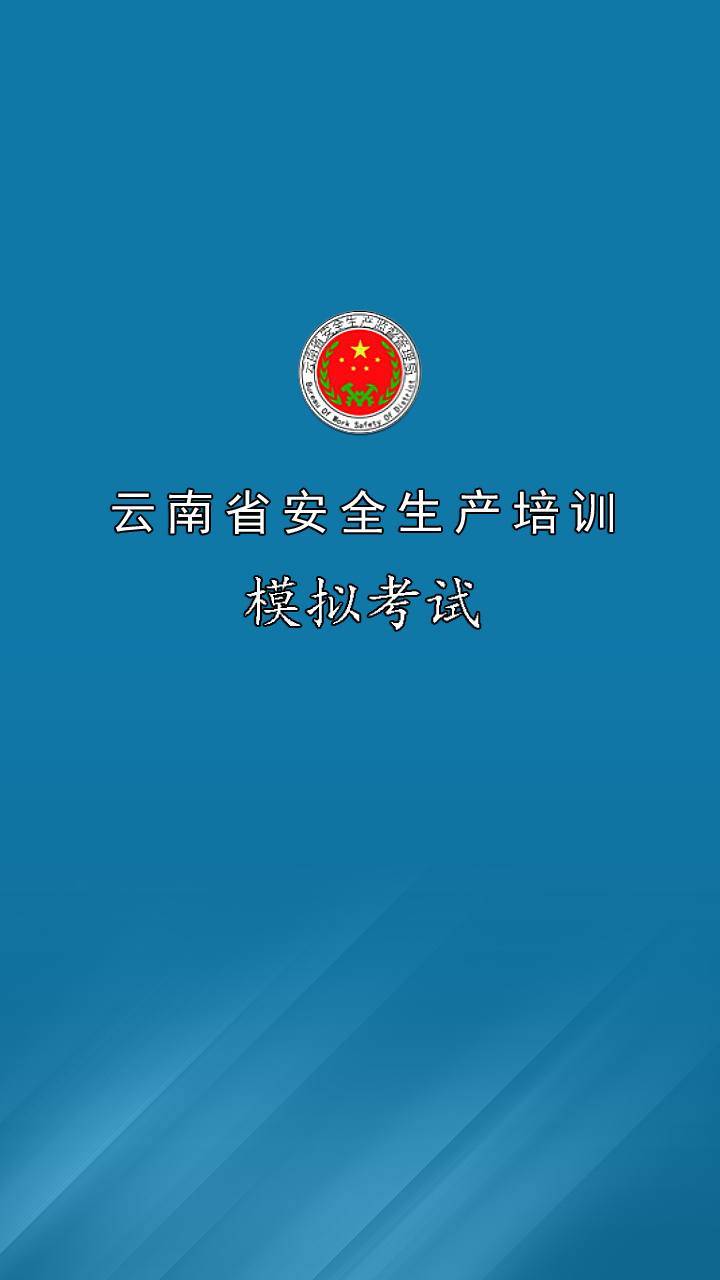
<style>
.page{position:relative;width:720px;height:1280px;background:#1078a7}
.page>*{position:absolute;margin:0}
.t1{font:48px "SimHei";letter-spacing:0.2em;color:#ffffff}
.t2{font:60px "¿¬Ìå";color:#ffffff}
</style>
<div class="page">
<p class="t1" style="left:112px;top:489px;width:501px;height:141px;text-align:center">云南省安全生产培训<br><span class="t2">模拟考试</span></p>
</div>
